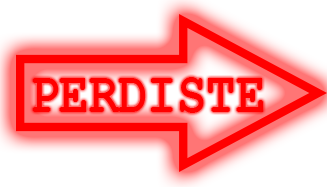
<style>
.page{position:relative;width:327px;height:187px;background:#ffffff}
.page>*{position:absolute;margin:0}
.t1{font:58.3px "CourierNewPS-BoldMT";color:#ff0000;scale:0.84 1}
</style>
<div class="page">
<p class="t1" style="left:32px;top:77px;width:232px;height:36px">PERDISTE</p>
</div>
